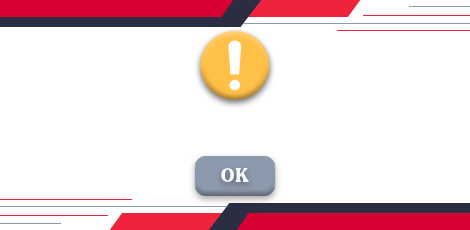
<style>
.page{position:relative;width:470px;height:230px;background:#ffffff}
.page>*{position:absolute;margin:0}
.t1{font:18px "MADEDillan";letter-spacing:0.025em;color:#f9f9f9}
</style>
<div class="page">
<p class="t1" style="left:221px;top:168px;width:28px;height:14px">OK</p>
</div>
